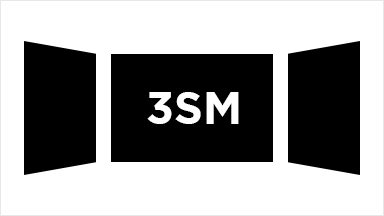
<style>
.page{position:relative;width:384px;height:216px;background:#ffffff}
.page>*{position:absolute;margin:0}
.t1{font:45px "GothamBold";color:#ffffff}
</style>
<div class="page">
<p class="t1" style="left:147px;top:92px;width:92px;height:32px">3SM</p>
</div>
